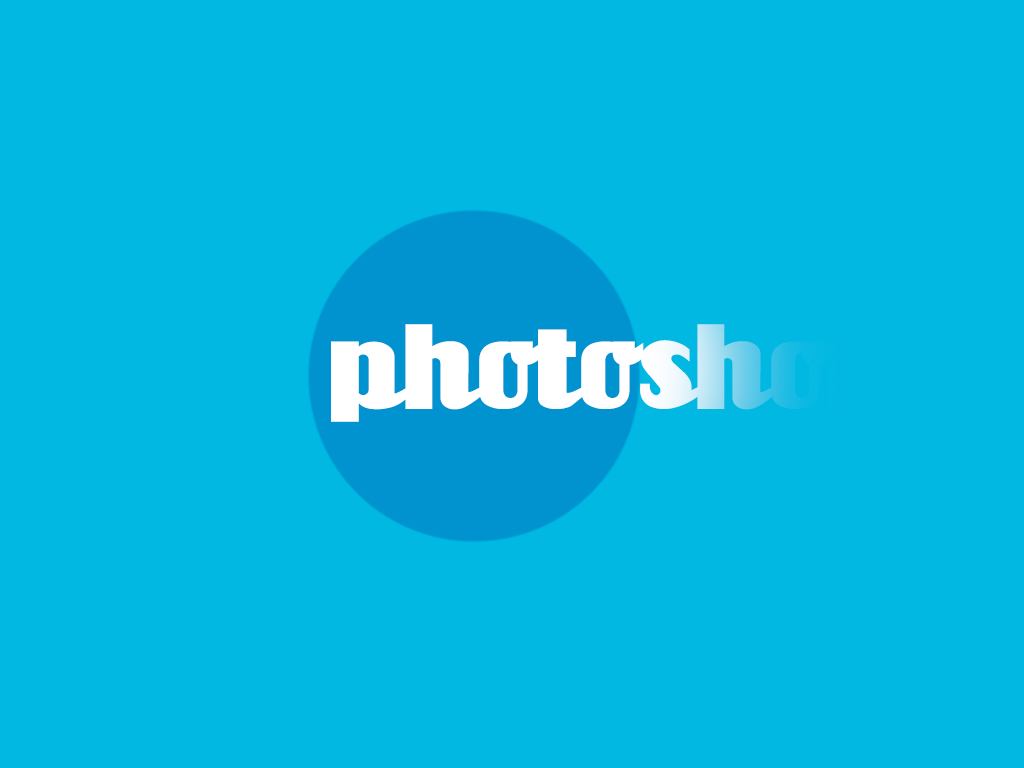
<style>
.page{position:relative;width:1024px;height:768px;background:#00b8e2}
.page>*{position:absolute;margin:0}
.t1{font:111px "Unicorn";color:#ffffff}
</style>
<div class="page">
<p class="t1" style="left:331px;top:324px;width:580px;height:98px">photoshop</p>
</div>
